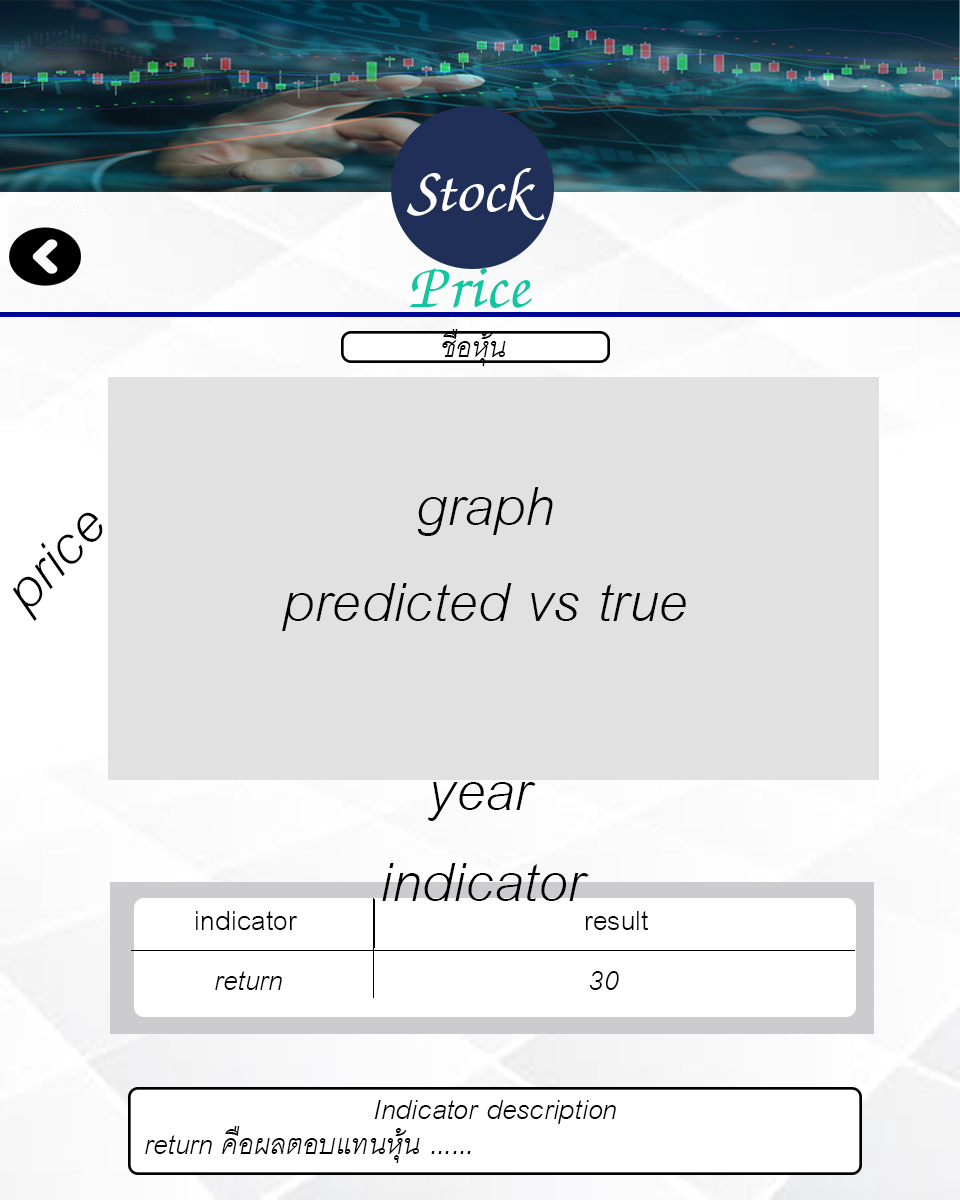
<style>
.page{position:relative;width:960px;height:1200px;background:#e1e1e1}
.page>*{position:absolute;margin:0}
.t1{font:80px "JSWansika-Italic";color:#ffffff}
.t2{font:80px "JSWansika-Italic";color:#13c6a2}
.t3{font:40px "CordiaNew-Italic";color:#000000}
.t4{font:80px "CordiaNew-Italic";color:#010101}
.t5{font:80px "CordiaNew-Italic";color:#000000}
.t6{font:40px "CordiaNew";color:#000004}
</style>
<div class="page">
<p class="t1" style="left:406px;top:168px;width:139px;height:140px;text-align:center">Stock<br><span class="t2">Price</span></p>
<p class="t3" style="left:442px;top:329px;width:64px;height:37px">ชื่อหุ้น</p>
<p class="t4" style="left:282px;top:487px;width:404px;height:144px;text-align:center">graph<br>predicted vs true</p>
<p class="t5" style="left:12px;top:512px;width:91px;height:109px;rotate:-47deg">price</p>
<p class="t5" style="left:428px;top:782px;width:108px;height:39px">year</p>
<p class="t5" style="left:382px;top:863px;width:207px;height:38px">indicator</p>
<p class="t6" style="left:196px;top:911px;width:101px;height:19px">indicator</p>
<p class="t6" style="left:585px;top:911px;width:63px;height:19px">result</p>
<p class="t3" style="left:215px;top:971px;width:67px;height:19px">return</p>
<p class="t3" style="left:589px;top:971px;width:30px;height:19px">30</p>
<p class="t3" style="left:374px;top:1100px;width:242px;height:24px">Indicator description</p>
<p class="t3" style="left:145px;top:1126px;width:326px;height:37px">return คือผลตอบแทนหุ้น ......</p>
</div>
